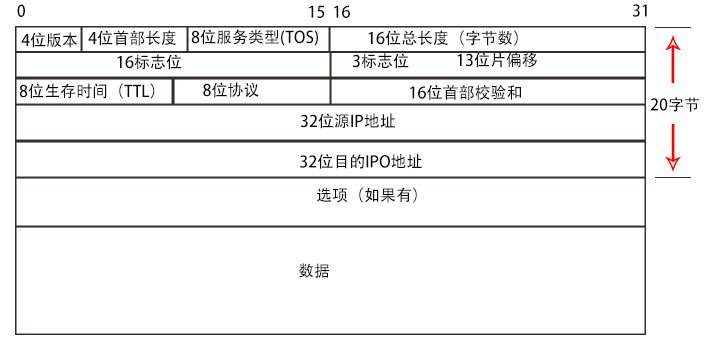
<style>
.page{position:relative;width:727px;height:353px;background:#ffffff}
.page>*{position:absolute;margin:0}
.t1{font:16px "AdobeHeitiStd-Regular";color:#0a0909}
</style>
<div class="page">
<p class="t1" style="left:17px;top:4px;width:8px;height:13px">0</p>
<p class="t1" style="left:309px;top:5px;width:41px;height:13px">15  16</p>
<p class="t1" style="left:632px;top:4px;width:15px;height:13px">31</p>
<p class="t1" style="left:88px;top:30px;width:88px;height:16px">4位首部长度</p>
<p class="t1" style="left:191px;top:29px;width:127px;height:17px">8位服务类型(TOS)</p>
<p class="t1" style="left:368px;top:30px;width:150px;height:16px">16位总长度（字节数）</p>
<p class="t1" style="left:21px;top:32px;width:57px;height:16px">4位版本</p>
<p class="t1" style="left:117px;top:54px;width:65px;height:16px">16标志位</p>
<p class="t1" style="left:352px;top:53px;width:57px;height:16px">3标志位</p>
<p class="t1" style="left:457px;top:52px;width:80px;height:16px">13位片偏移</p>
<p class="t1" style="left:19px;top:83px;width:136px;height:16px">8位生存时间（TTL）</p>
<p class="t1" style="left:203px;top:82px;width:56px;height:16px">8位协议</p>
<p class="t1" style="left:410px;top:85px;width:111px;height:15px">16位首部校验和</p>
<p class="t1" style="left:650px;top:97px;width:50px;height:15px">20字节</p>
<p class="t1" style="left:300px;top:113px;width:95px;height:16px">32位源IP地址</p>
<p class="t1" style="left:300px;top:154px;width:122px;height:15px">32位目的IPO地址</p>
<p class="t1" style="left:316px;top:187px;width:101px;height:16px">选项（如果有）</p>
<p class="t1" style="left:298px;top:263px;width:31px;height:15px">数据</p>
</div>
